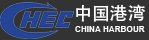
<style>
.page{position:relative;width:149px;height:40px;background:#333333}
.page>*{position:absolute;margin:0}
.t1{font:17.9px "AdobeHeitiStd-Regular";color:#ffffff}
.t2{font:8.2px "Arial-BoldMT";color:#ffffff}
</style>
<div class="page">
<p class="t1" style="left:76px;top:4px;width:69px;height:18px">中国港湾</p>
<p class="t2" style="left:75px;top:26px;width:70px;height:6px">CHINA HARBOUR</p>
</div>
